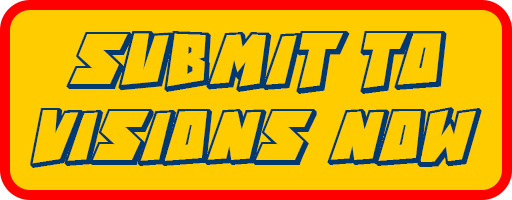
<style>
.page{position:relative;width:512px;height:200px;background:#ffcc00}
.page>*{position:absolute;margin:0}
.t1{font:36px "ActionComics";color:#003a70}
.t2{font:34.9px "ActionComics";color:#003a70}
</style>
<div class="page">
<p class="t1" style="left:66px;top:31px;width:381px;height:63px">SUBMIT TO</p>
<p class="t2" style="left:30px;top:107px;width:452px;height:61px">VISIONS NOW</p>
</div>
